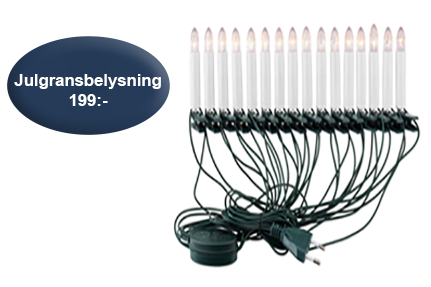
<style>
.page{position:relative;width:431px;height:287px;background:#ffffff}
.page>*{position:absolute;margin:0}
.t1{font:16.7px "Arial-BoldMT";color:#ffffff}
</style>
<div class="page">
<p class="t1" style="left:14px;top:74px;width:147px;height:32px;text-align:center">Julgransbelysning<br>199:-</p>
</div>
